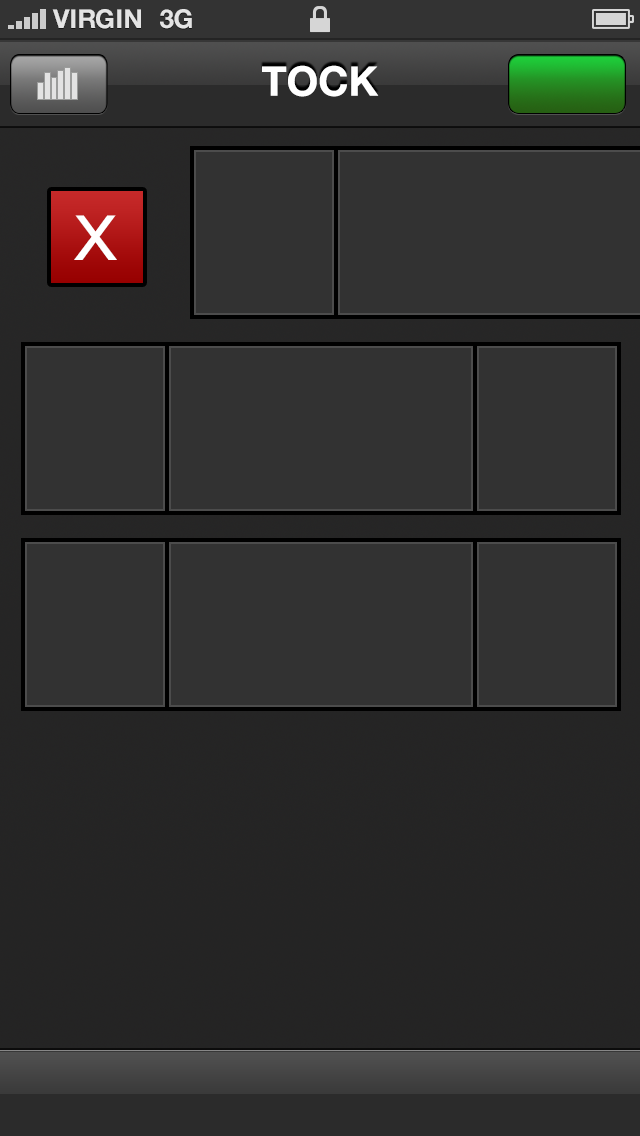
<style>
.page{position:relative;width:640px;height:1136px;background:#323232}
.page>*{position:absolute;margin:0}
.t1{font:26px "HelveticaNeue-Bold";color:#e4e4e4;text-transform:uppercase}
.t2{font:40.8px "HelveticaNeue-Bold";color:#fcfcfc}
.t3{font:81.5px "Menlo-RegularForPowerline";letter-spacing:0.005em;color:#ffffff}
</style>
<div class="page">
<p class="t1" style="left:52px;top:9px;width:89px;height:20px">VIRGIN</p>
<p class="t1" style="left:160px;top:9px;width:32px;height:20px">3G</p>
<p class="t2" style="left:262px;top:65px;width:117px;height:32px">TOCK</p>
<p class="t3" style="left:74px;top:215px;width:43px;height:45px">x</p>
</div>
